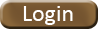
<style>
.page{position:relative;width:100px;height:30px}
.page>*{position:absolute;margin:0}
.t1{font:24px "Calibri";color:#ffffff}
</style>
<div class="page">
<p class="t1" style="left:23px;top:6px;width:50px;height:19px">Login</p>
</div>
